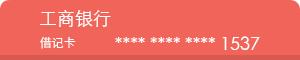
<style>
.page{position:relative;width:300px;height:60px;background:#f0645a}
.page>*{position:absolute;margin:0}
.t1{font:18px "STHeitiSC-Light";color:#ffffff}
.t2{font:12px "STHeitiSC-Light";color:#ffffff}
</style>
<div class="page">
<p class="t1" style="left:40px;top:10px;width:71px;height:17px">工商银行</p>
<p class="t2" style="left:40px;top:37px;width:36px;height:12px">借记卡</p>
<p class="t1" style="left:115px;top:36px;width:145px;height:14px">**** **** **** 1537</p>
</div>
